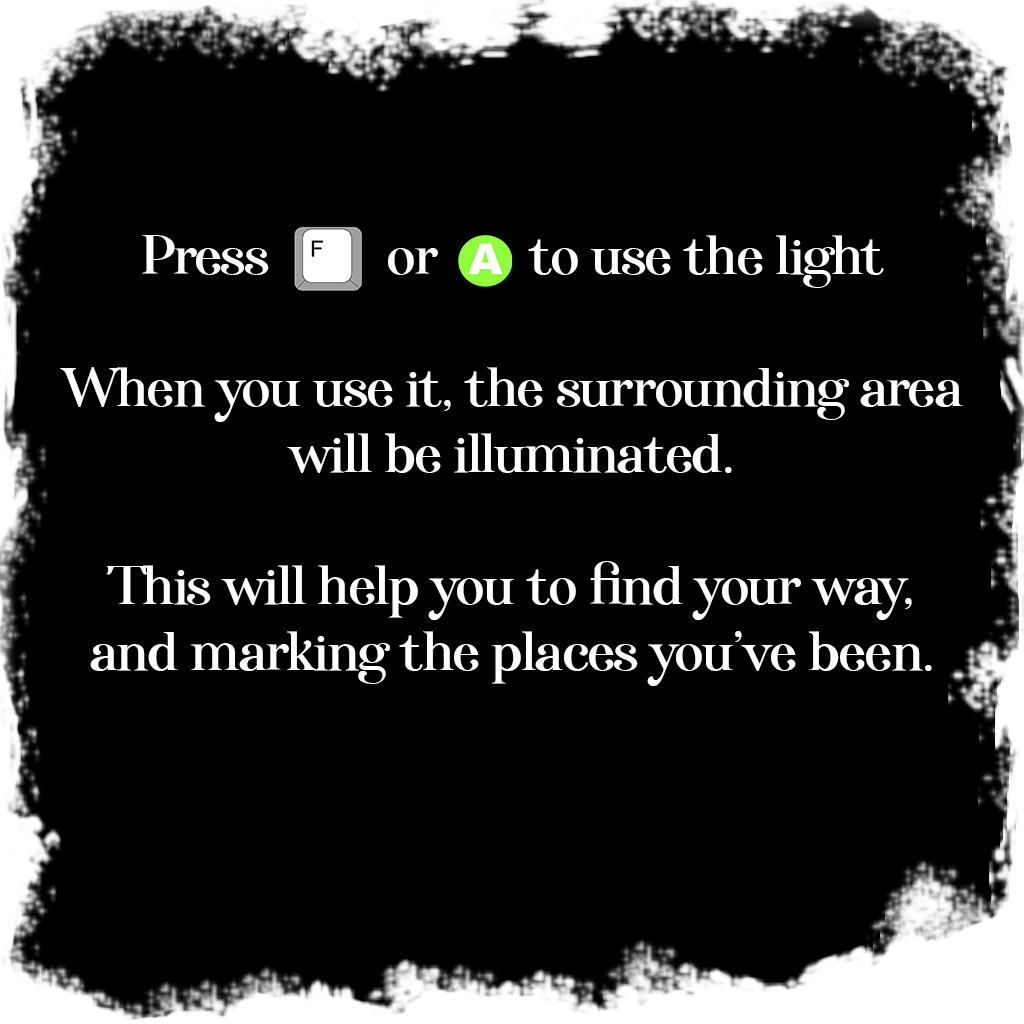
<style>
.page{position:relative;width:1024px;height:1024px;background:#000000}
.page>*{position:absolute;margin:0}
.t1{font:55px "Afterglow-Regular";color:#ffffff}
</style>
<div class="page">
<p class="t1" style="left:60px;top:235px;width:903px;height:451px;text-align:center">Press         or       to use the light<br><br>When you use it, the surrounding area<br>will be illuminated.<br><br>This will help you to find your way,<br>and marking the places you’ve been.</p>
</div>
